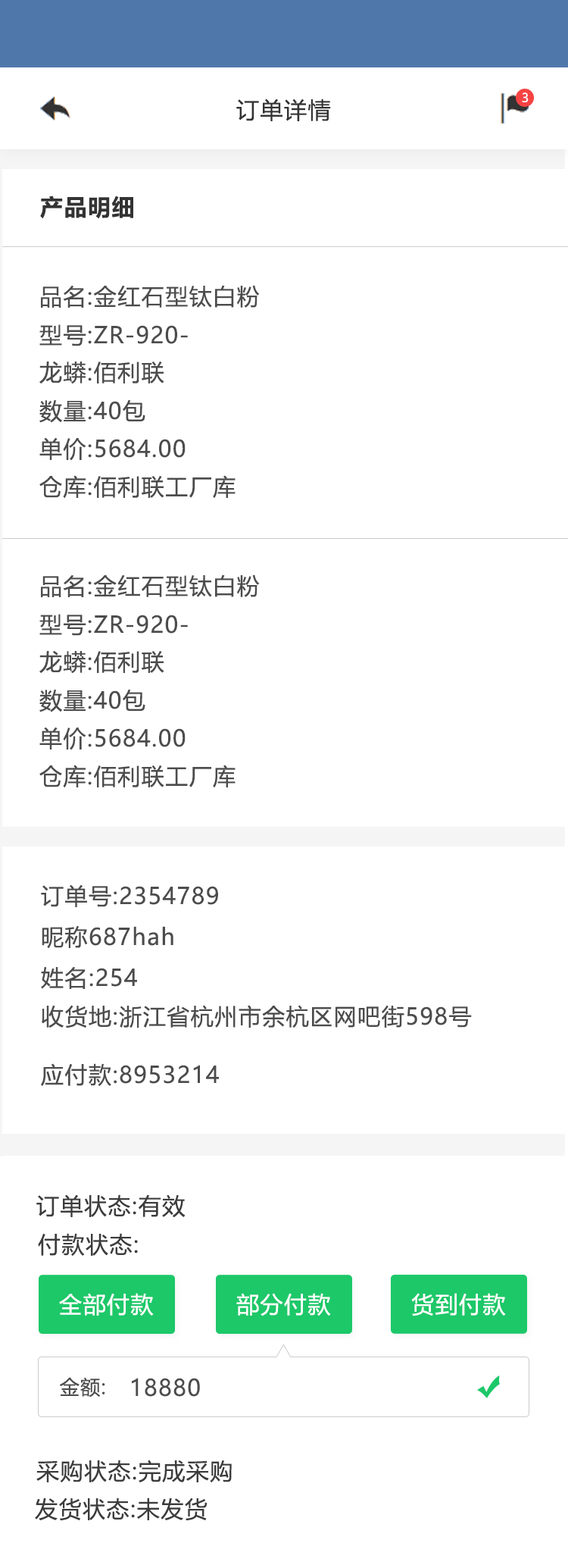
<style>
.page{position:relative;width:568px;height:1568px;background:#ffffff}
.page>*{position:absolute;margin:0}
.t1{font:22.7px "MicrosoftYaHeiUI";letter-spacing:0.05em;color:#333333}
.t2{font:12.1px "MicrosoftYaHeiUI";color:#ffffff}
.t3{font:22.7px "MicrosoftYaHeiUI-Bold";letter-spacing:0.05em;color:#333333}
.t4{font:22.7px "MicrosoftYaHeiUI";letter-spacing:0.05em;color:#4c4c4c}
.t5{font:22.7px "MicrosoftYaHeiUI";letter-spacing:0.05em;color:#3c3c3c}
.t6{font:22.7px "MicrosoftYaHeiUI";letter-spacing:0.05em;color:#ffffff}
.t7{font:19.7px "MicrosoftYaHeiUI";letter-spacing:0.05em;color:#4c4c4c}
</style>
<div class="page">
<p class="t1" style="left:236px;top:99px;width:95px;height:22px">订单详情</p>
<p class="t2" style="left:522px;top:92px;width:7px;height:10px">3</p>
<p class="t3" style="left:40px;top:196px;width:93px;height:23px">产品明细</p>
<p class="t4" style="left:41px;top:285px;width:219px;height:23px">品名:金红石型钛白粉</p>
<p class="t4" style="left:39px;top:324px;width:149px;height:22px">型号:ZR-920-</p>
<p class="t4" style="left:39px;top:361px;width:125px;height:23px">龙蟒:佰利联</p>
<p class="t4" style="left:39px;top:399px;width:107px;height:24px">数量:40包</p>
<p class="t4" style="left:39px;top:437px;width:147px;height:24px">单价:5684.00</p>
<p class="t4" style="left:39px;top:475px;width:197px;height:24px">仓库:佰利联工厂库</p>
<p class="t4" style="left:41px;top:574px;width:219px;height:23px">品名:金红石型钛白粉</p>
<p class="t4" style="left:39px;top:614px;width:149px;height:22px">型号:ZR-920-</p>
<p class="t4" style="left:39px;top:650px;width:125px;height:24px">龙蟒:佰利联</p>
<p class="t4" style="left:39px;top:689px;width:107px;height:23px">数量:40包</p>
<p class="t4" style="left:39px;top:727px;width:147px;height:23px">单价:5684.00</p>
<p class="t4" style="left:39px;top:765px;width:197px;height:23px">仓库:佰利联工厂库</p>
<p class="t4" style="left:41px;top:884px;width:177px;height:23px">订单号:2354789</p>
<p class="t4" style="left:42px;top:925px;width:132px;height:24px">昵称687hah</p>
<p class="t4" style="left:41px;top:966px;width:96px;height:23px">姓名:254</p>
<p class="t4" style="left:42px;top:1005px;width:430px;height:23px">收货地:浙江省杭州市余杭区网吧街598号</p>
<p class="t4" style="left:41px;top:1063px;width:178px;height:23px">应付款:8953214</p>
<p class="t5" style="left:36px;top:1194px;width:150px;height:24px">订单状态:有效</p>
<p class="t5" style="left:38px;top:1233px;width:100px;height:23px">付款状态:</p>
<p class="t6" style="left:59px;top:1293px;width:95px;height:23px">全部付款</p>
<p class="t6" style="left:236px;top:1293px;width:95px;height:23px">部分付款</p>
<p class="t6" style="left:412px;top:1293px;width:94px;height:23px">货到付款</p>
<p class="t7" style="left:60px;top:1377px;width:45px;height:20px">金额:</p>
<p class="t4" style="left:132px;top:1378px;width:68px;height:19px">18880</p>
<p class="t5" style="left:36px;top:1460px;width:196px;height:22px">采购状态:完成采购</p>
<p class="t5" style="left:35px;top:1498px;width:173px;height:23px">发货状态:未发货</p>
</div>
